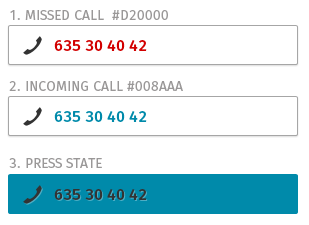
<style>
.page{position:relative;width:309px;height:225px;background:#ffffff}
.page>*{position:absolute;margin:0}
.t1{font:13.8px "Moz";color:#9a9898;text-transform:uppercase}
.t2{font:16px "MozMedium";color:#d20000}
.t3{font:16px "MozMedium";color:#008aaa}
.t4{font:16px "MozMedium";color:#333333}
</style>
<div class="page">
<p class="t1" style="left:10px;top:10px;width:158px;height:10px">1. missed call  #d20000</p>
<p class="t2" style="left:54px;top:40px;width:93px;height:11px">635 30 40 42</p>
<p class="t1" style="left:9px;top:81px;width:174px;height:10px">2. Incoming call #008aaa</p>
<p class="t3" style="left:54px;top:111px;width:93px;height:11px">635 30 40 42</p>
<p class="t1" style="left:9px;top:158px;width:93px;height:10px">3. Press State</p>
<p class="t4" style="left:54px;top:189px;width:93px;height:11px">635 30 40 42</p>
</div>
